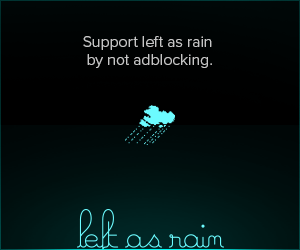
<style>
.page{position:relative;width:300px;height:250px}
.page>*{position:absolute;margin:0}
.t1{font:16px/12px "ProximaNova-Light";color:#c6c6c6}
</style>
<div class="page">
<p class="t1" style="left:83px;top:36px;width:129px;height:32px;text-align:center">Support left as rain <br>by not adblocking.</p>
</div>
